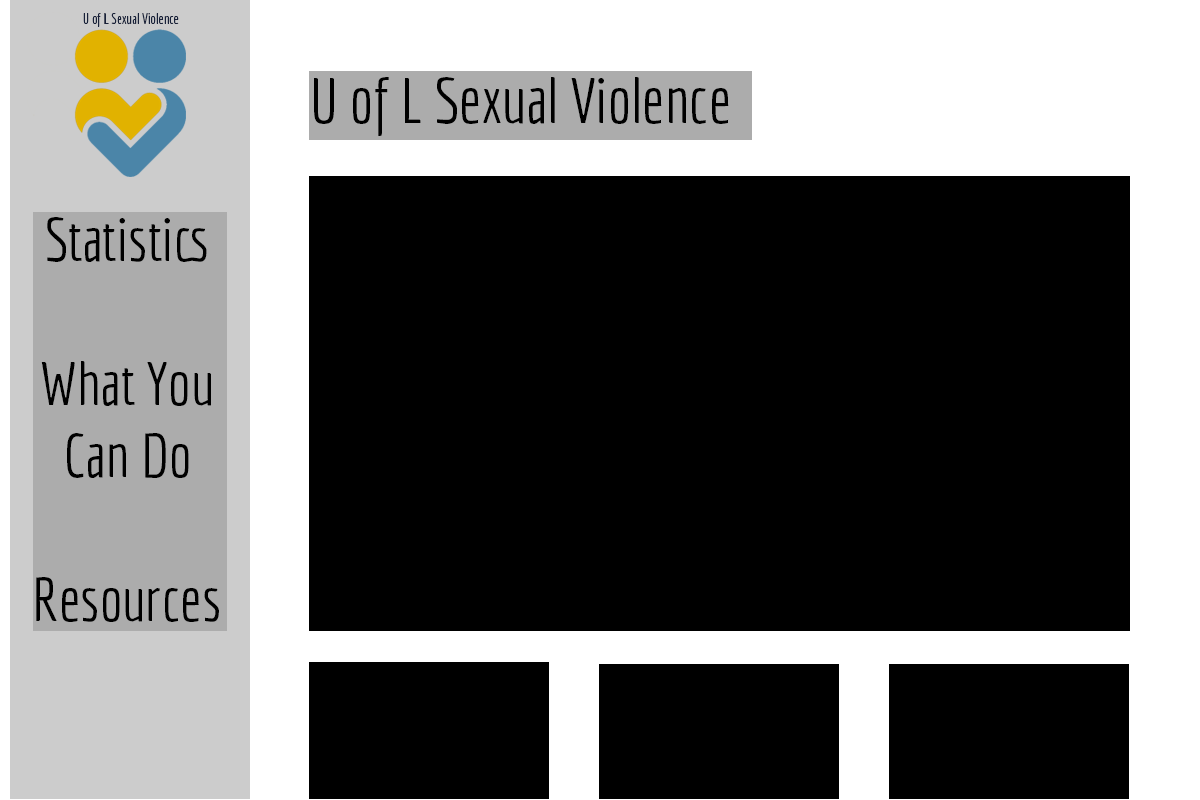
<style>
.page{position:relative;width:1200px;height:800px;background:#000000}
.page>*{position:absolute;margin:0}
.t1{font:14.3px "Economica-Regular";color:#182139}
.t2{font:62.8px "Economica-Regular";color:#000000}
.t3{font:60px "Economica-Regular";color:#000000}
</style>
<div class="page">
<p class="t1" style="left:83px;top:13px;width:96px;height:14px">U of L Sexual Violence</p>
<p class="t2" style="left:314px;top:77px;width:415px;height:59px">U of L Sexual Violence</p>
<p class="t3" style="left:36px;top:217px;width:183px;height:405px;text-align:center">Statistics<br><br>What You Can Do<br><br>Resources</p>
</div>
